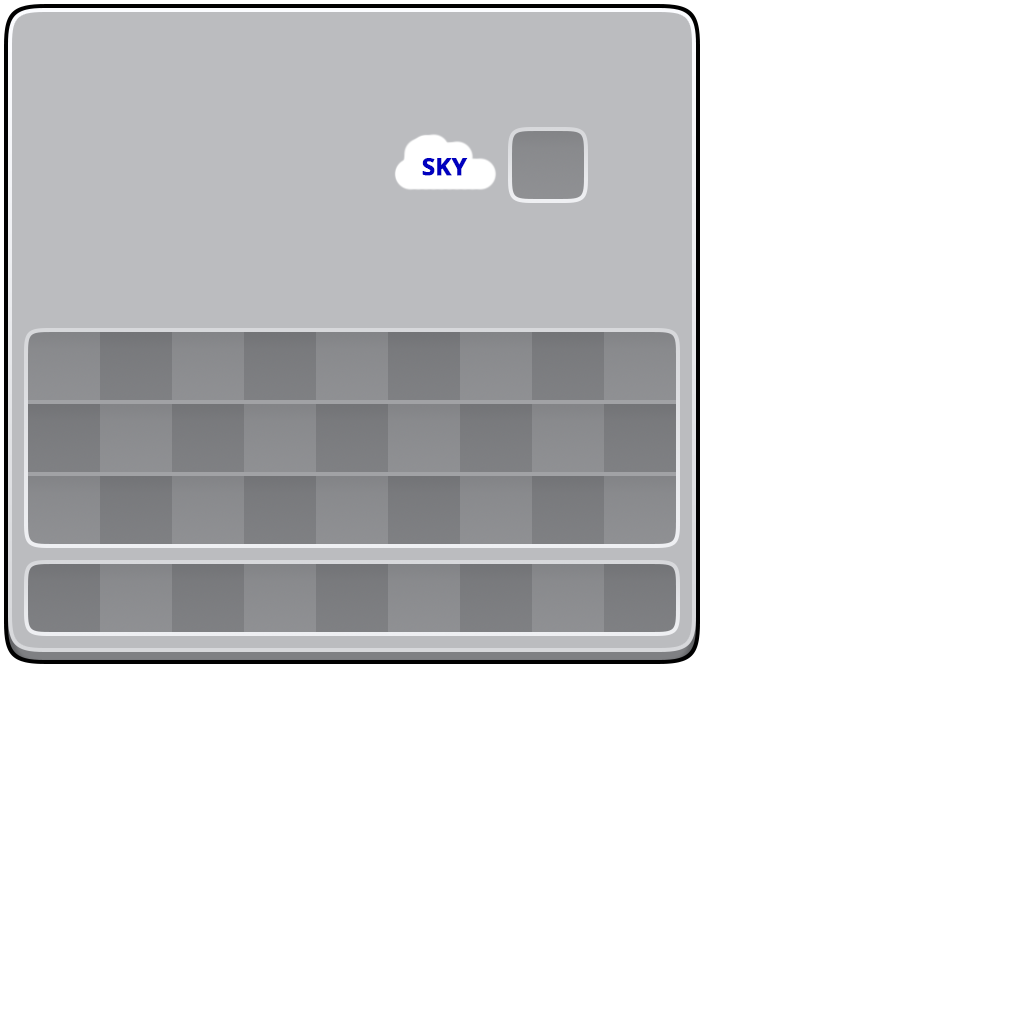
<style>
.page{position:relative;width:1024px;height:1024px;background:#ffffff}
.page>*{position:absolute;margin:0}
.t1{font:24px "NotoSans-Bold";color:#0000bf;font-weight:bold}
</style>
<div class="page">
<p class="t1" style="left:422px;top:158px;width:46px;height:18px">SKY</p>
</div>
